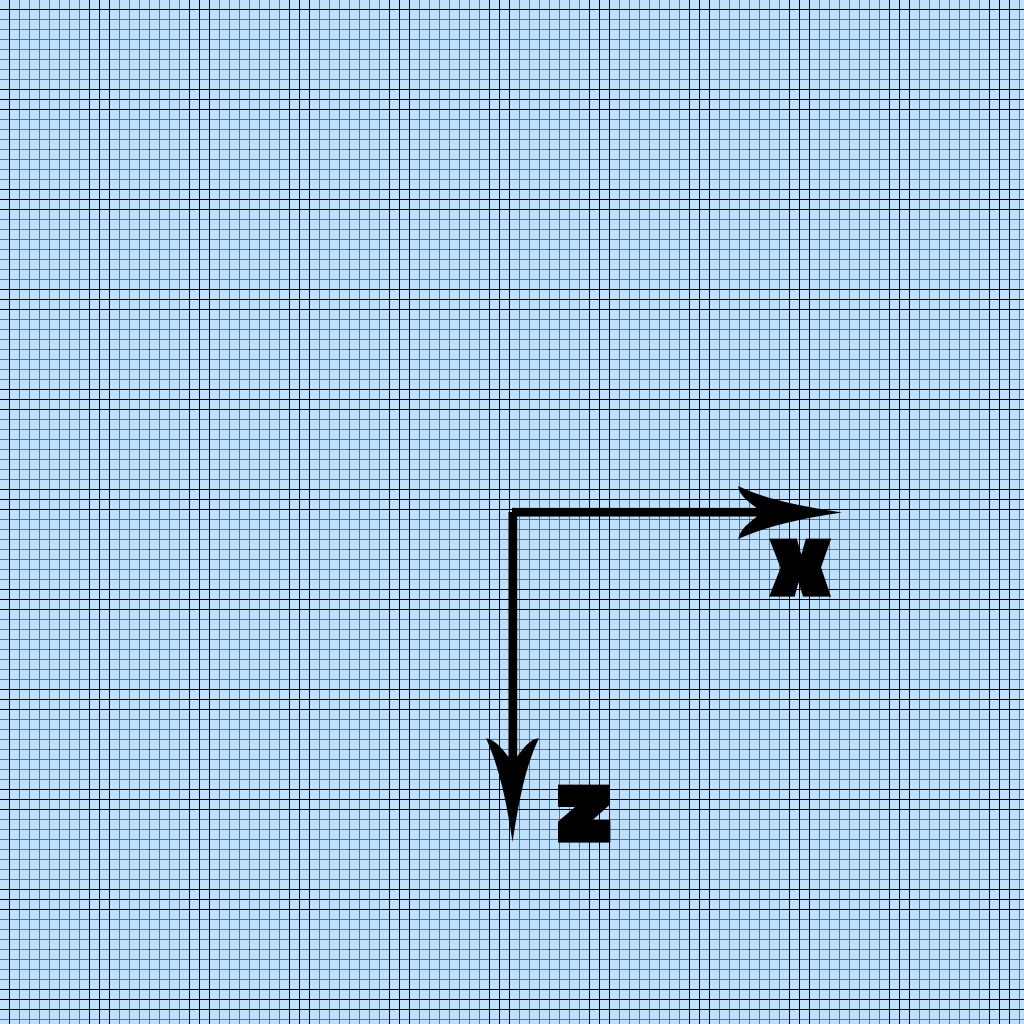
<style>
.page{position:relative;width:1024px;height:1024px;background:#bde1ff}
.page>*{position:absolute;margin:0}
.t1{font:114.9px "Titillium-Black";letter-spacing:-0.04em;color:#000000}
</style>
<div class="page">
<p class="t1" style="left:769px;top:538px;width:63px;height:59px">x</p>
<p class="t1" style="left:558px;top:784px;width:53px;height:59px">z</p>
</div>
